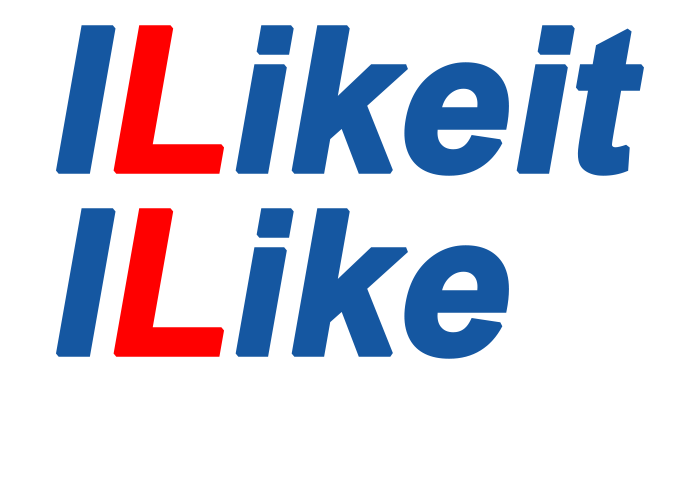
<style>
.page{position:relative;width:700px;height:500px;background:#ffffff}
.page>*{position:absolute;margin:0}
.t1{font:200px "Arial-BoldMT";letter-spacing:-0.025em;color:#1557a1;font-weight:bold;font-style:italic}
.t2{font:200px "Arial-BoldMT";letter-spacing:-0.025em;color:#ff0000;font-weight:bold;font-style:italic}
</style>
<div class="page">
<p class="t1" style="left:56px;top:25px;width:588px;height:151px">I<span class="t2">L</span>ikeit</p>
<p class="t1" style="left:56px;top:208px;width:453px;height:151px">I<span class="t2">L</span>ike</p>
</div>
